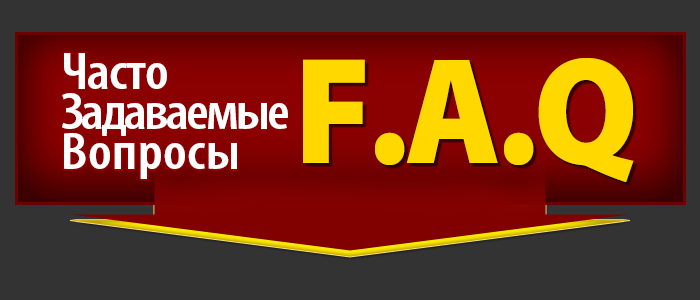
<style>
.page{position:relative;width:700px;height:300px;background:#333333}
.page>*{position:absolute;margin:0}
.t1{font:52.9px/40px "MyriadPro-SemiboldCond";letter-spacing:-0.05em;color:#ffffff;scale:1.1 1}
.t2{font:52.9px/40px "MyriadPro-SemiboldCond";letter-spacing:-0.02em;color:#ffffff;scale:1.1 1}
.t3{font:52.9px/40px "MyriadPro-SemiboldCond";letter-spacing:0.01em;color:#ffffff;scale:1.1 1}
.t4{font:152.9px "MyriadPro-Black";letter-spacing:-0.025em;color:#ffd800;scale:0.93 1}
</style>
<div class="page">
<p class="t1" style="left:62px;top:53px;width:226px;height:126px"><span class="t2">Часто<br></span>Задаваемые<br><span class="t3">Вопросы</span></p>
<p class="t4" style="left:303px;top:58px;width:331px;height:124px">F.A.Q</p>
</div>
